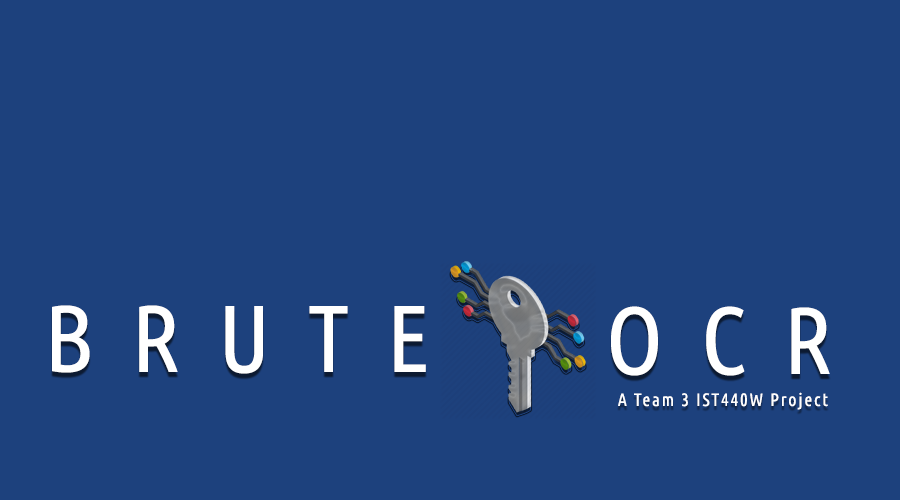
<style>
.page{position:relative;width:900px;height:500px;background:#1d417d}
.page>*{position:absolute;margin:0}
.t1{font:95px "UbuntuCondensed-Regular";letter-spacing:0.4em;color:#ffffff}
.t2{font:18px "UbuntuCondensed-Regular";letter-spacing:0.1em;color:#ffffff}
</style>
<div class="page">
<p class="t1" style="left:52px;top:305px;width:374px;height:69px">BRUTE</p>
<p class="t1" style="left:611px;top:306px;width:219px;height:70px">OCR</p>
<p class="t2" style="left:618px;top:392px;width:210px;height:18px">A Team 3 IST440W Project</p>
</div>
